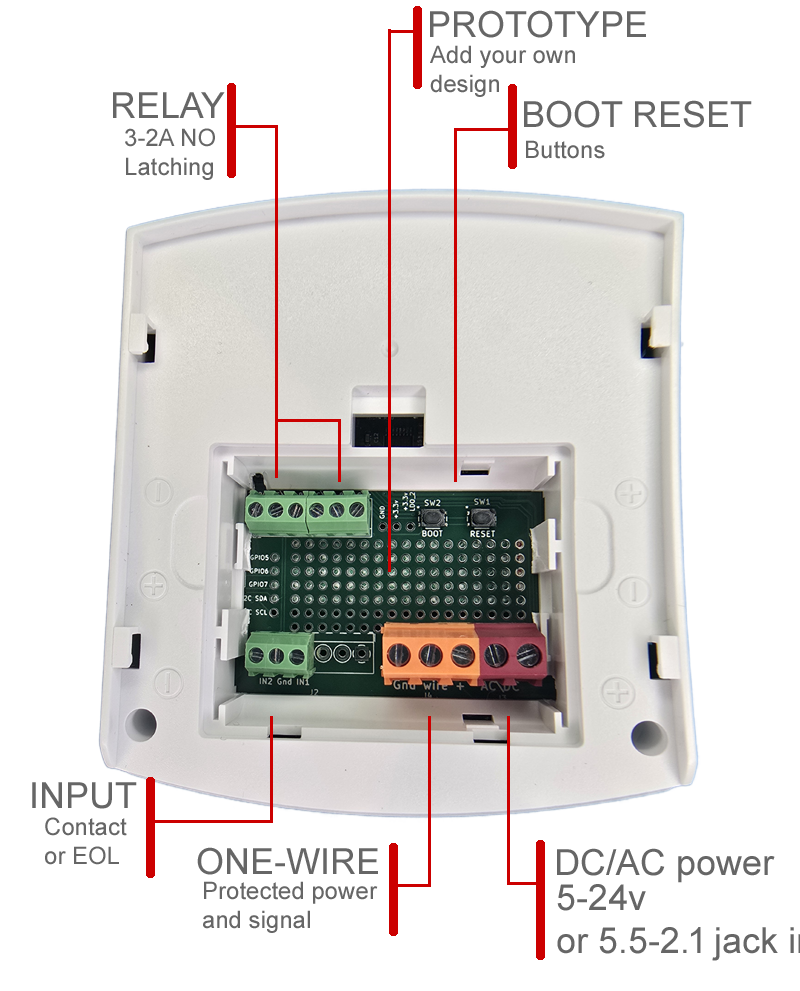
<style>
.page{position:relative;width:800px;height:991px;background:#ffffff}
.page>*{position:absolute;margin:0}
.t1{font:36px "ArialMT";color:#666666}
.t2{font:24px "ArialMT";color:#666666}
</style>
<div class="page">
<p class="t1" style="left:430px;top:10px;width:216px;height:28px">PROTOTYPE</p>
<p class="t2" style="left:430px;top:45px;width:145px;height:52px">Add your own<br>design</p>
<p class="t1" style="left:113px;top:92px;width:112px;height:26px">RELAY</p>
<p class="t1" style="left:524px;top:100px;width:228px;height:28px">BOOT RESET</p>
<p class="t2" style="left:125px;top:128px;width:90px;height:52px">3-2A NO<br>Latching</p>
<p class="t2" style="left:526px;top:140px;width:79px;height:19px">Buttons</p>
<p class="t1" style="left:32px;top:782px;width:105px;height:27px">INPUT</p>
<p class="t2" style="left:45px;top:817px;width:82px;height:48px">Contact<br>or EOL</p>
<p class="t1" style="left:197px;top:847px;width:181px;height:28px">ONE-WIRE</p>
<p class="t1" style="left:557px;top:848px;width:218px;height:35px">DC/AC power</p>
<p class="t2" style="left:203px;top:881px;width:175px;height:52px">Protected power<br>and signal</p>
</div>
